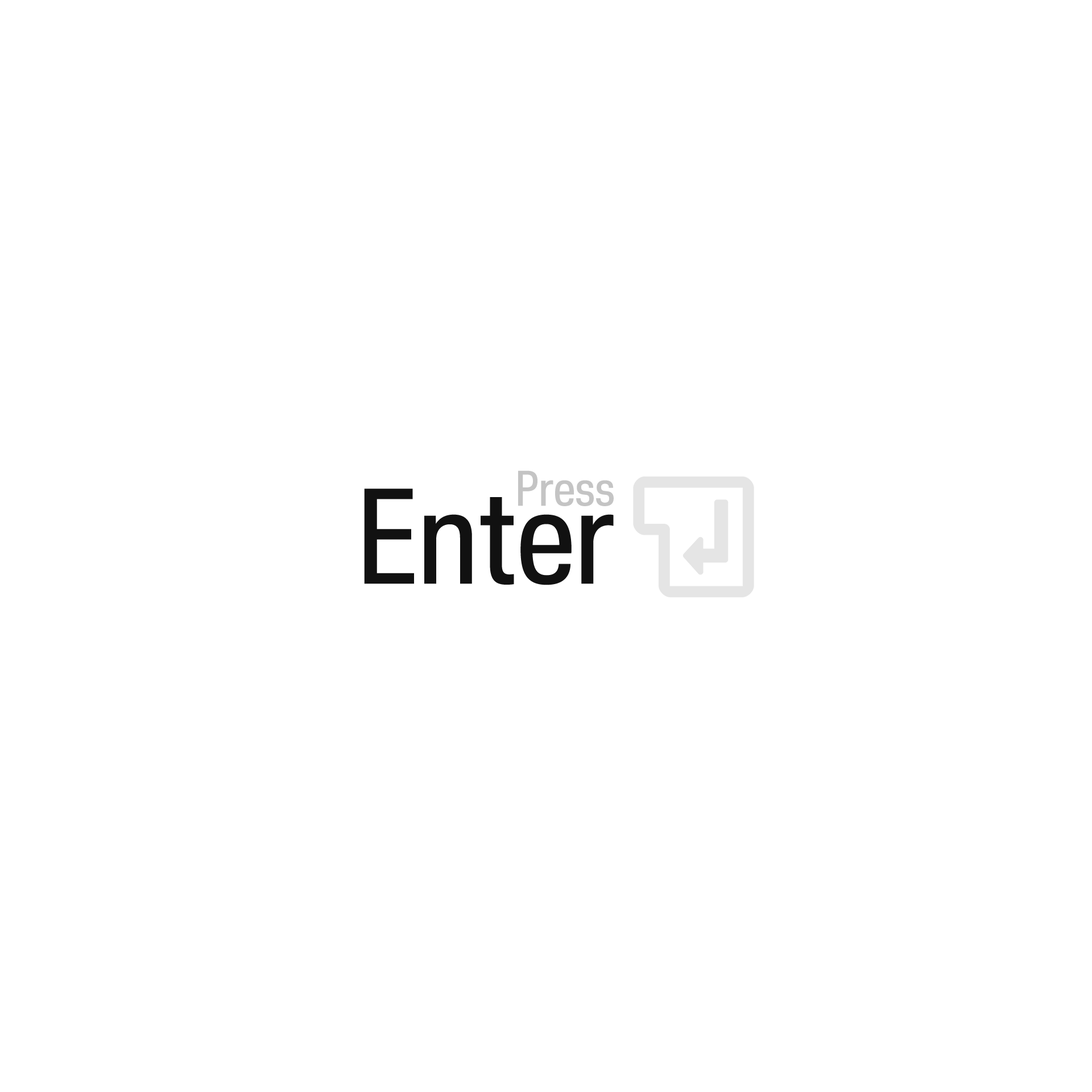
<style>
.page{position:relative;width:1092px;height:1092px;background:#ffffff}
.page>*{position:absolute;margin:0}
.t1{font:85.3px "NuberNext-DemiBoldCondensed";color:#c2c2c2}
.t2{font:232.2px "NuberNext-DemiBoldCondensed";color:#111111}
</style>
<div class="page">
<p class="t1" style="left:518px;top:470px;width:96px;height:36px;opacity:0.96">Press</p>
<p class="t2" style="left:364px;top:489px;width:250px;height:96px">Enter</p>
</div>
